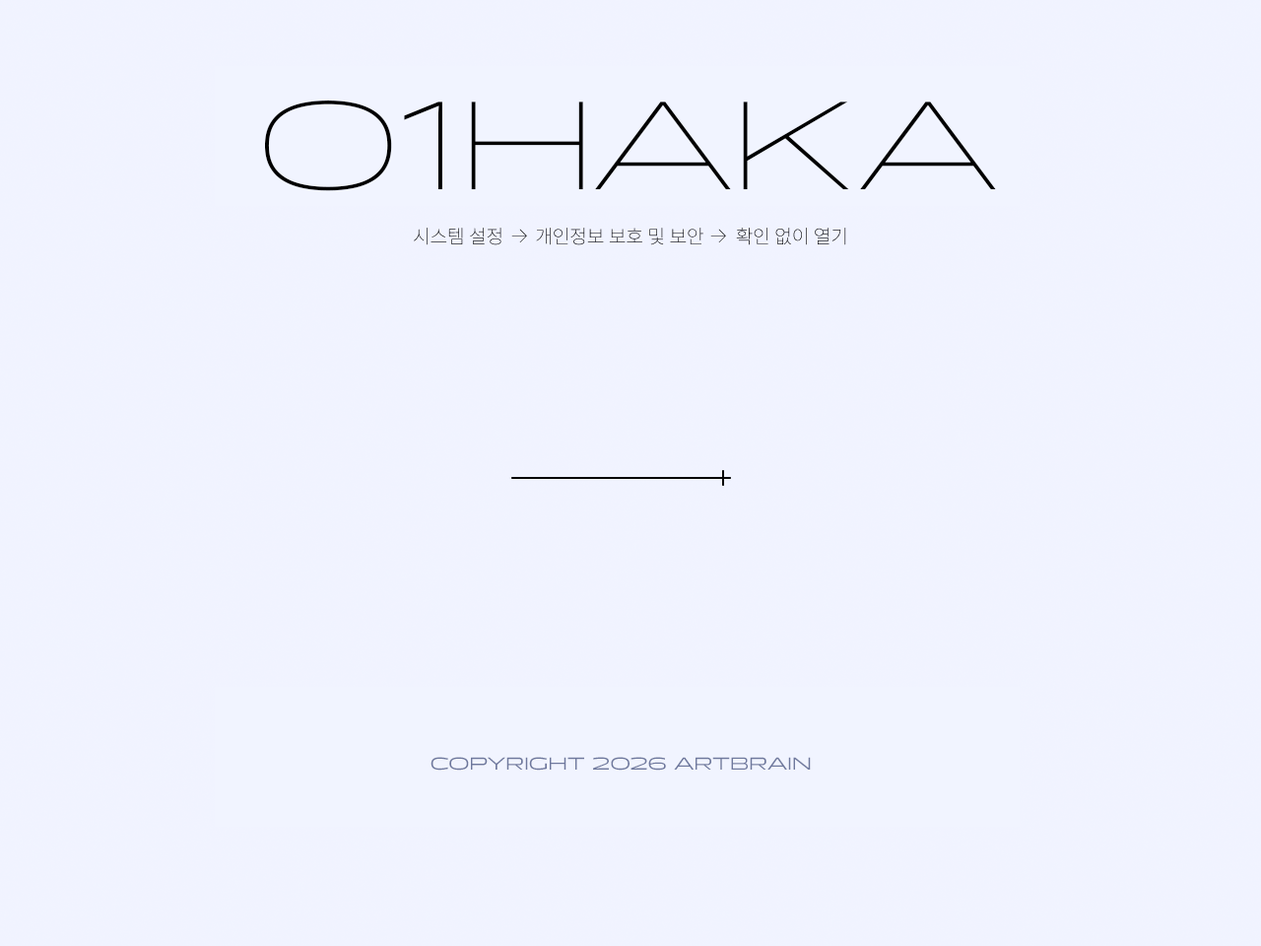
<style>
.page{position:relative;width:1261px;height:946px;background:#f0f3ff}
.page>*{position:absolute;margin:0}
.t1{font:128.1px "PanchangVariable-Extralight";color:#000000}
.t2{font:17.7px "PanchangVariable-Regular";color:#6e789d;text-transform:uppercase}
</style>
<div class="page">
<p class="t1" style="left:265px;top:100px;width:731px;height:91px">01HAKA</p>
<p class="t2" style="left:430px;top:757px;width:381px;height:13px">copyright 2026 artbrain</p>
</div>
